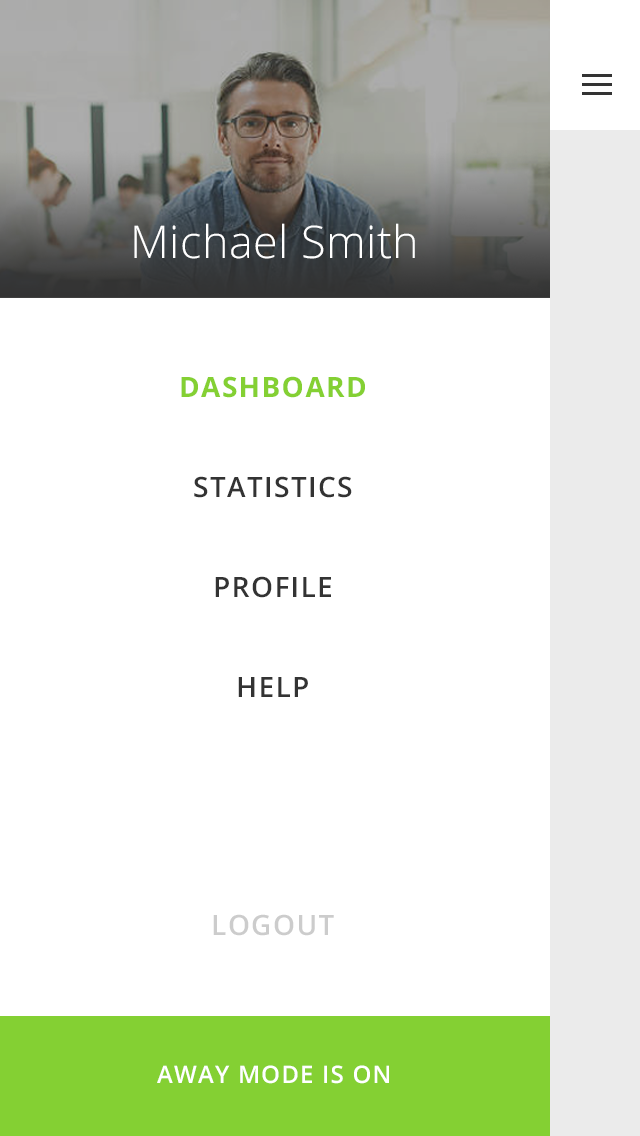
<style>
.page{position:relative;width:640px;height:1136px;background:#ffffff}
.page>*{position:absolute;margin:0}
.t1{font:45px "OpenSans-Light";letter-spacing:0.01em;color:#ffffff}
.t2{font:28px/100px "OpenSans-Semibold";letter-spacing:0.05em;color:#333333;text-transform:uppercase}
.t3{font:28px/100px "OpenSans-Bold";letter-spacing:0.05em;color:#84d033;text-transform:uppercase}
.t4{font:28px/138px "OpenSans-Semibold";letter-spacing:0.05em;color:#cccccc;text-transform:uppercase}
.t5{font:24px "OpenSans-Semibold";letter-spacing:0.05em;color:#ffffff;text-transform:uppercase}
</style>
<div class="page">
<p class="t1" style="left:134px;top:223px;width:281px;height:36px">Michael Smith</p>
<p class="t2" style="left:181px;top:376px;width:184px;height:560px;text-align:center"><span class="t3">DASHBOARD<br></span>STATISTICS<br>PROFILE<br>help<br><br><span class="t4">logout</span></p>
<p class="t5" style="left:157px;top:1065px;width:232px;height:19px">AWAY MODE IS ON</p>
</div>
